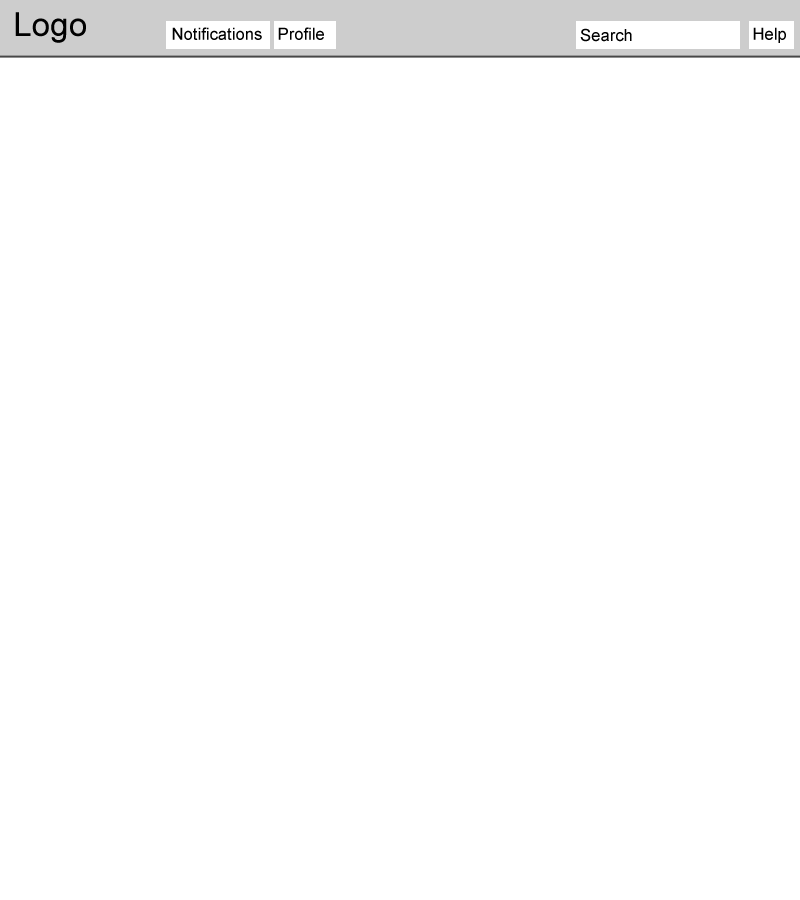
<style>
.page{position:relative;width:800px;height:900px;background:#ffffff}
.page>*{position:absolute;margin:0}
.t1{font:33.4px "ArialMT";color:#000000}
.t2{font:16.7px "ArialMT";color:#000000}
</style>
<div class="page">
<p class="t1" style="left:15px;top:12px;width:71px;height:31px">Logo</p>
<p class="t2" style="left:172px;top:27px;width:90px;height:13px">Notifications</p>
<p class="t2" style="left:278px;top:27px;width:46px;height:13px">Profile</p>
<p class="t2" style="left:580px;top:28px;width:52px;height:14px">Search</p>
<p class="t2" style="left:753px;top:27px;width:33px;height:16px">Help</p>
</div>
